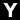
<style>
.page{position:relative;width:20px;height:20px;background:#000000}
.page>*{position:absolute;margin:0}
.t1{font:20px "HelveticaNeue-Bold";color:#ffffff}
</style>
<div class="page">
<p class="t1" style="left:3px;top:3px;width:15px;height:14px">Y</p>
</div>
